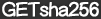
<style>
.page{position:relative;width:101px;height:19px}
.page>*{position:absolute;margin:0}
.t1{font:19.1px "YuppySC-Regular";letter-spacing:-0.04em;color:#ffffff;font-weight:bold}
</style>
<div class="page">
<p class="t1" style="left:2px;top:1px;width:97px;height:16px">GETsha256</p>
</div>
